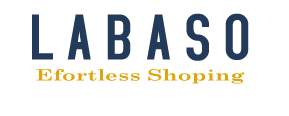
<style>
.page{position:relative;width:289px;height:116px;background:#ffffff}
.page>*{position:absolute;margin:0}
.t1{font:69px "AccidentalPresidency";color:#223b5a}
.t2{font:15.4px "CenturySchoolbook-Bold";color:#dfa60c;scale:1.47 1}
</style>
<div class="page">
<p class="t1" style="left:32px;top:13px;width:217px;height:48px">L A B A S O</p>
<p class="t2" style="left:36px;top:69px;width:209px;height:15px">Efortless Shoping</p>
</div>
